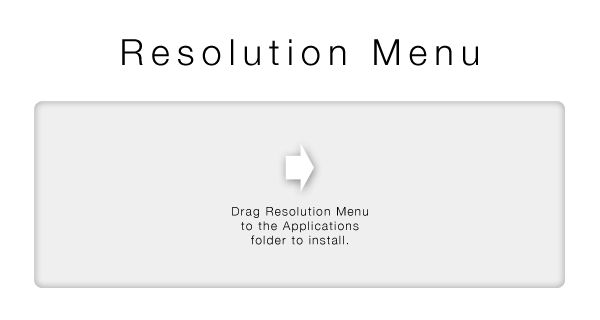
<style>
.page{position:relative;width:600px;height:320px;background:#ffffff}
.page>*{position:absolute;margin:0}
.t1{font:36px "HelveticaNeue-Light";letter-spacing:0.2em;color:#000000}
.t2{font:12px "HelveticaNeue-Light";letter-spacing:0.1em;color:#000000}
</style>
<div class="page">
<p class="t1" style="left:122px;top:39px;width:356px;height:27px">Resolution Menu</p>
<p class="t2" style="left:232px;top:207px;width:136px;height:38px;text-align:center">Drag Resolution Menu to the Applications folder to install.</p>
</div>
